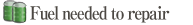
<style>
.page{position:relative;width:193px;height:25px;background:#ffffff}
.page>*{position:absolute;margin:0}
.t1{font:18px "RyuminPro-ExBold";letter-spacing:-0.08em;color:#4c4843;scale:0.9 1}
</style>
<div class="page">
<p class="t1" style="left:30px;top:6px;width:140px;height:17px">Fuel needed to repair</p>
</div>
